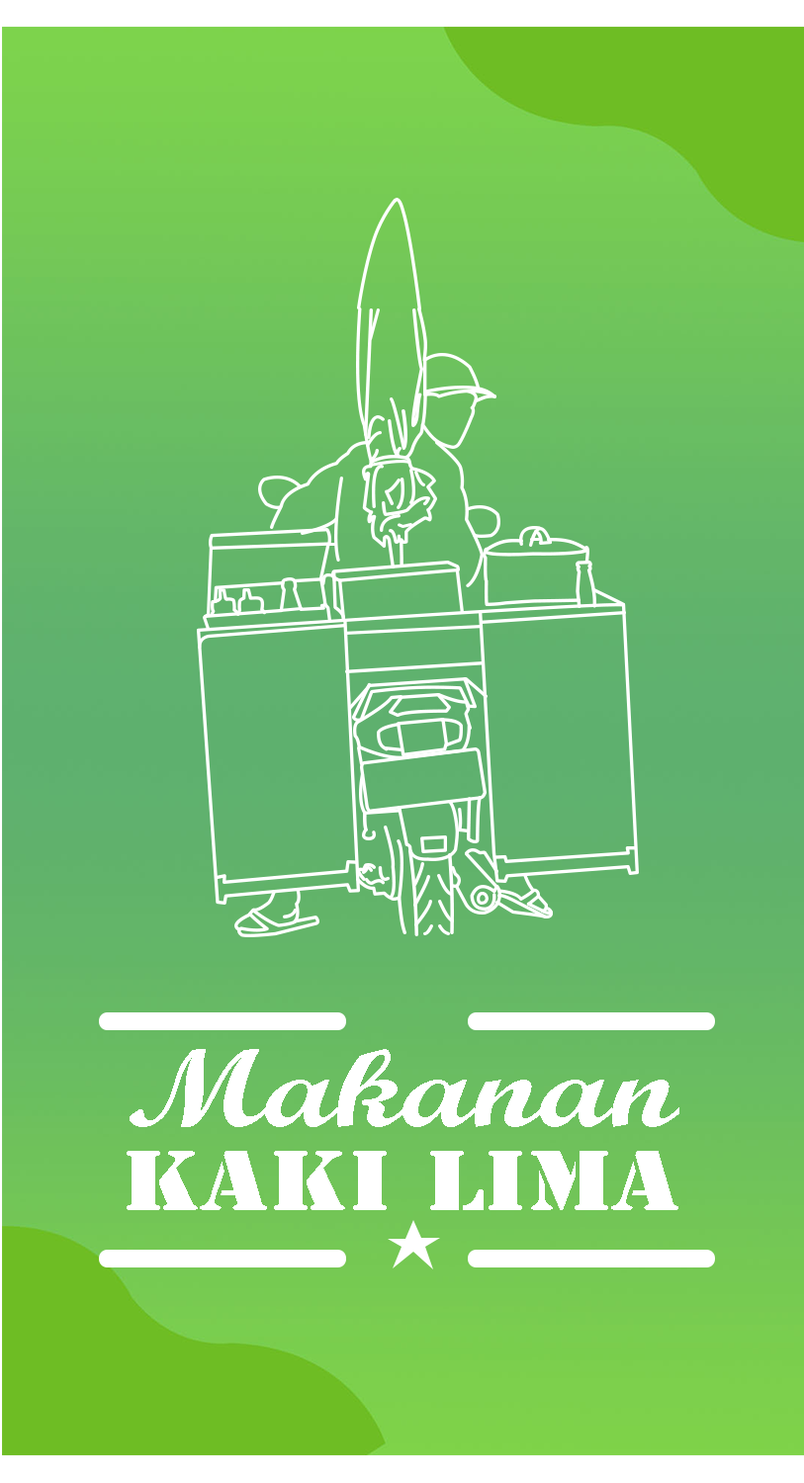
<style>
.page{position:relative;width:804px;height:1483px}
.page>*{position:absolute;margin:0}
.t1{font:110.5px "ScriptMTBold";color:#ffffff;scale:1.24 1}
.t2{font:19px "StencilStd";color:#ffffff;scale:1.23 1}
</style>
<div class="page">
<p class="t1" style="left:130px;top:1049px;width:549px;height:78px">Makanan</p>
<p class="t2" style="left:127px;top:1151px;width:551px;height:59px;text-align:center">KAKI LIMA</p>
</div>
